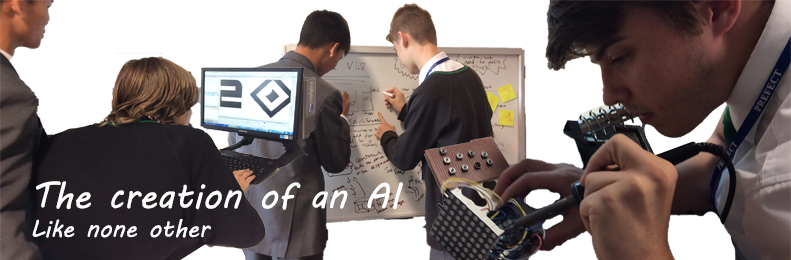
<style>
.page{position:relative;width:791px;height:260px;background:#ffffff}
.page>*{position:absolute;margin:0}
.t1{font:36px "MVBoli";color:#ffffff}
.t2{font:24px "MVBoli";color:#ffffff}
</style>
<div class="page">
<p class="t1" style="left:32px;top:181px;width:371px;height:57px">The creation of an AI<br><span class="t2">Like none other</span></p>
</div>
